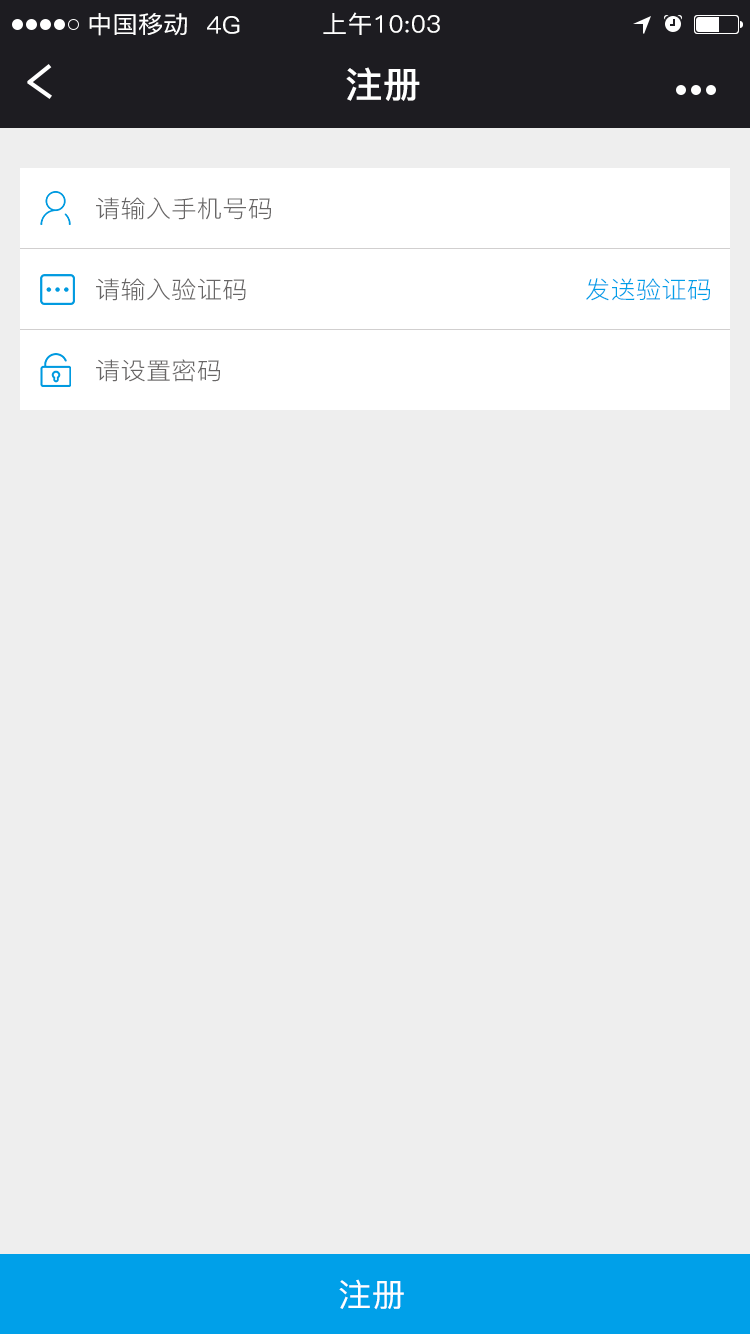
<style>
.page{position:relative;width:750px;height:1334px;background:#eeeeee}
.page>*{position:absolute;margin:0}
.t1{font:24px "PingFang-SC-Medium";letter-spacing:0.01em;color:#ffffff;scale:1.05 1}
.t2{font:36px "PingFang-SC-Bold";letter-spacing:0.01em;color:#ffffff;scale:1.05 1}
.t3{font:24px "PingFang-SC-Regular";letter-spacing:0.01em;color:#686666;scale:1.05 1}
.t4{font:24px "PingFang-SC-Regular";letter-spacing:0.01em;color:#00a0e9;scale:1.05 1}
.t5{font:32px "PingFang-SC-Medium";letter-spacing:0.01em;color:#ffffff;scale:1.05 1}
</style>
<div class="page">
<p class="t1" style="left:89px;top:13px;width:98px;height:23px">中国移动</p>
<p class="t1" style="left:207px;top:16px;width:33px;height:18px">4G</p>
<p class="t1" style="left:323px;top:12px;width:117px;height:23px">上午10:03</p>
<p class="t2" style="left:346px;top:67px;width:74px;height:34px">注册</p>
<p class="t3" style="left:96px;top:197px;width:175px;height:23px">请输入手机号码</p>
<p class="t3" style="left:96px;top:278px;width:150px;height:23px">请输入验证码</p>
<p class="t4" style="left:586px;top:278px;width:124px;height:23px">发送验证码</p>
<p class="t3" style="left:96px;top:359px;width:124px;height:23px">请设置密码</p>
<p class="t5" style="left:339px;top:1279px;width:65px;height:31px">注册</p>
</div>
